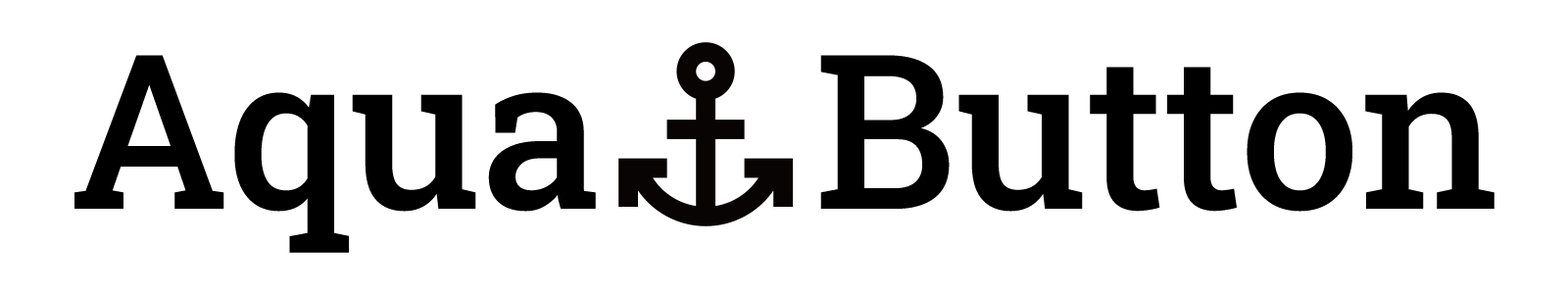
<style>
.page{position:relative;width:1568px;height:294px;background:#ffffff}
.page>*{position:absolute;margin:0}
.t1{font:215.6px "RobotoSlab-Medium";color:#000000}
</style>
<div class="page">
<p class="t1" style="left:74px;top:55px;width:1420px;height:198px">Aqua    Button</p>
</div>
